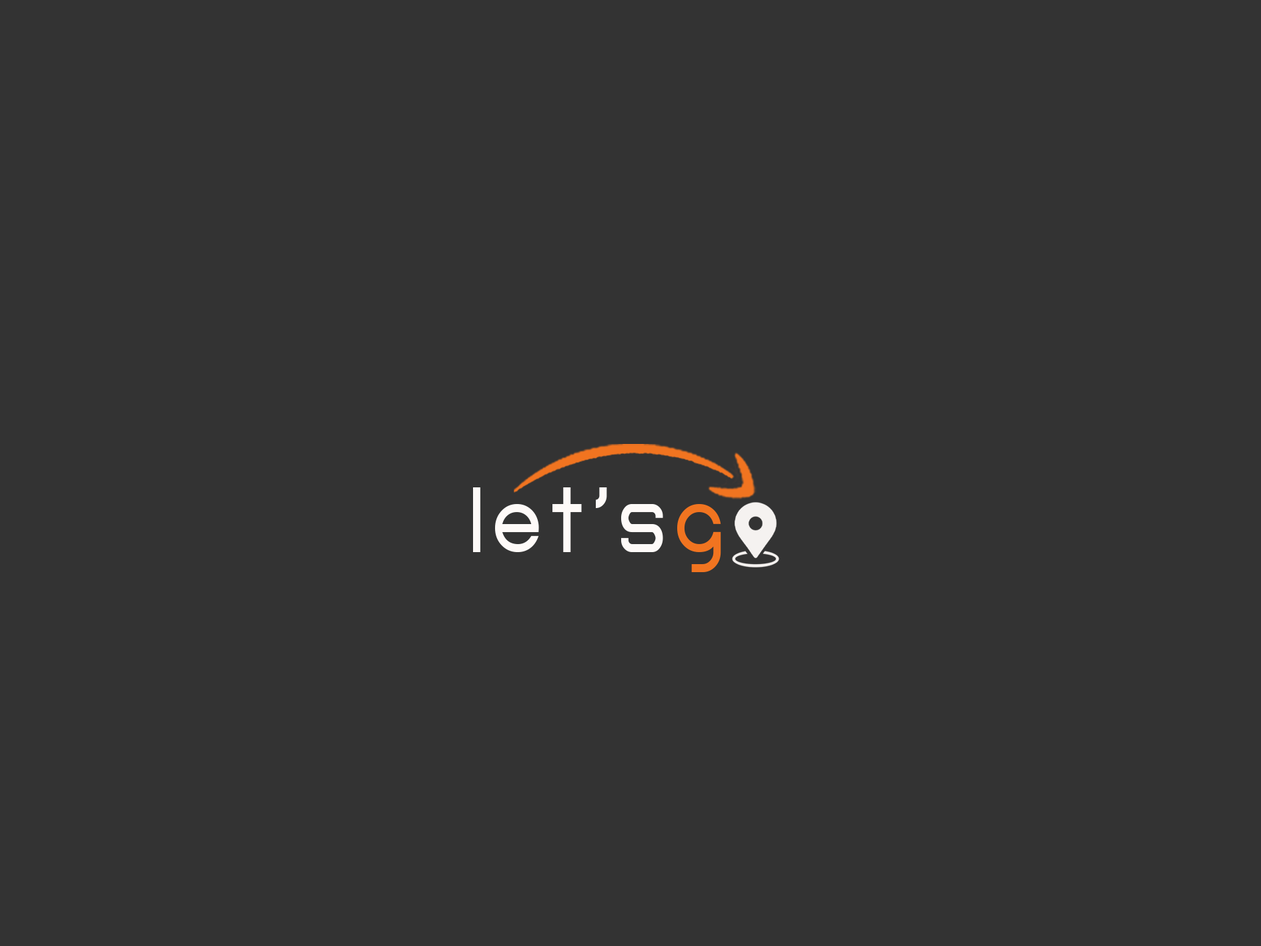
<style>
.page{position:relative;width:1261px;height:946px;background:#333333}
.page>*{position:absolute;margin:0}
.t1{font:84.5px "BayerSans";letter-spacing:0.14em;color:#fefaf8;scale:0.9 1}
.t2{font:84.5px "BayerSans";letter-spacing:0.14em;color:#f17420;scale:0.9 1}
</style>
<div class="page">
<p class="t1" style="left:473px;top:487px;width:248px;height:85px">let’s<span class="t2">g</span></p>
</div>
